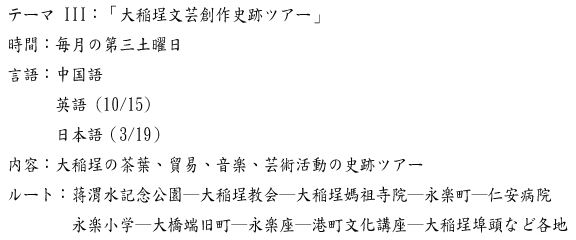
<style>
.page{position:relative;width:576px;height:240px;background:#ffffff}
.page>*{position:absolute;margin:0}
.t1{font:18px/30px "DFKaiShu-SB-Estd-BF";color:#060606;scale:0.89 1}
</style>
<div class="page">
<p class="t1" style="left:8px;top:5px;width:560px;height:228px">テーマ III：「大稲埕文芸創作史跡ツアー」<br>時間：毎月の第三土曜日<br>言語：中国語<br>      英語 (10/15)<br>      日本語（3/19） <br>内容：大稲埕の茶葉、貿易、音楽、芸術活動の史跡ツアー<br>ルート：蒋渭水記念公園─大稲埕教会─大稲埕媽祖寺院─永楽町─仁安病院<br>        永楽小学─大橋端旧町─永楽座─港町文化講座─大稲埕埠頭など各地</p>
</div>
